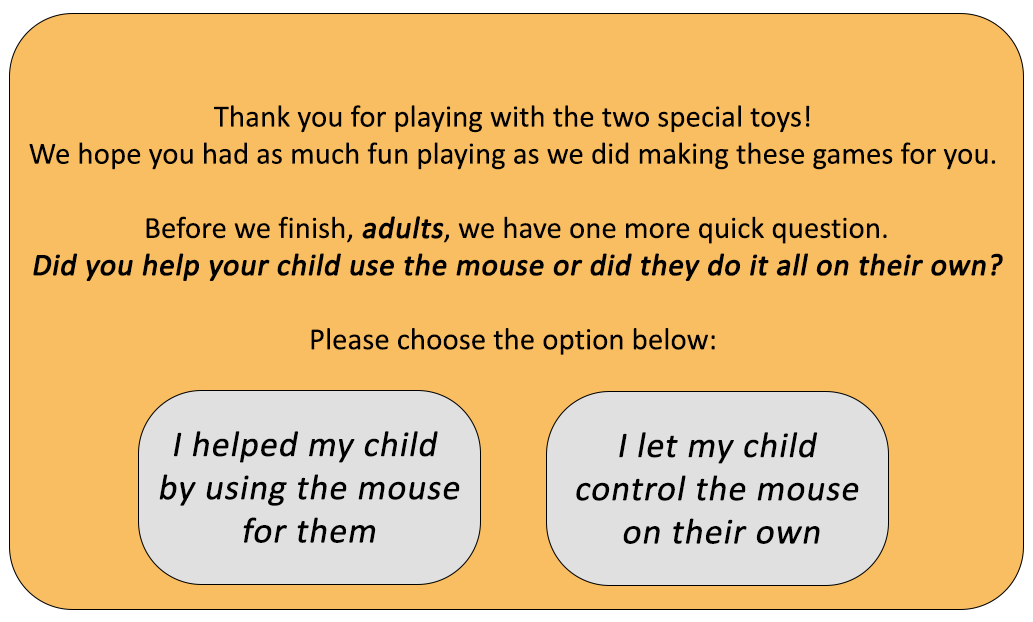
<style>
.page{position:relative;width:1033px;height:622px;background:#f8be61}
.page>*{position:absolute;margin:0}
.t1{font:30.9px "Calibri";color:#000000}
.t2{font:30.9px "Calibri";color:#000000;font-weight:bold;font-style:italic}
.t3{font:36px "Calibri";color:#000000;font-weight:bold;font-style:italic}
</style>
<div class="page">
<p class="t1" style="left:29px;top:105px;width:974px;height:250px;text-align:center">Thank you for playing with the two special toys! <br>We hope you had as much fun playing as we did making these games for you. <br><br>Before we finish, <span class="t2">adults</span>, we have one more quick question.<br><span class="t2">Did you help your child use the mouse or did they do it all on their own?<br><br></span>Please choose the option below:</p>
<p class="t3" style="left:159px;top:431px;width:301px;height:112px;text-align:center">I helped my child <br>by using the mouse<br>for them</p>
<p class="t3" style="left:576px;top:432px;width:283px;height:112px;text-align:center">I let my child <br>control the mouse <br>on their own</p>
</div>
